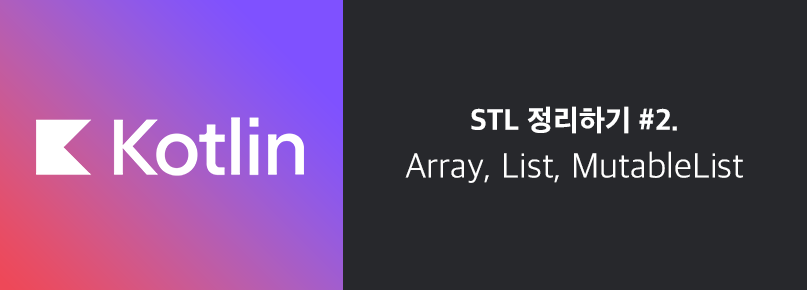
<style>
.page{position:relative;width:807px;height:290px;background:#27282c}
.page>*{position:absolute;margin:0}
.t1{font:36px/48px "AppleSDGothicNeoL00";color:#ffffff}
.t2{font:30px/48px "AppleSDGothicNeoEB00";color:#ffffff}
</style>
<div class="page">
<p class="t1" style="left:405px;top:106px;width:338px;height:77px;text-align:center"><span class="t2">STL 정리하기 #2.<br></span>Array, List, MutableList <br>&lt;u</p>
</div>
